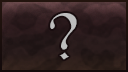
<style>
.page{position:relative;width:128px;height:72px}
.page>*{position:absolute;margin:0}
.t1{font:64px "PR-CelticNarrow";letter-spacing:-0.005em;color:#bdbdbd}
</style>
<div class="page">
<p class="t1" style="left:50px;top:13px;width:27px;height:47px">?</p>
</div>
